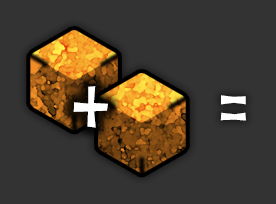
<style>
.page{position:relative;width:276px;height:204px;background:#333333}
.page>*{position:absolute;margin:0}
.t1{font:100px "Berylium-Bold";color:#ffffff;font-variant:small-caps}
.t2{font:100px "Berylium-Bold";color:#ffffff;font-variant:small-caps;scale:0.6 1}
</style>
<div class="page">
<p class="t1" style="left:73px;top:86px;width:35px;height:42px">+</p>
<p class="t2" style="left:220px;top:95px;width:26px;height:26px">=</p>
</div>
